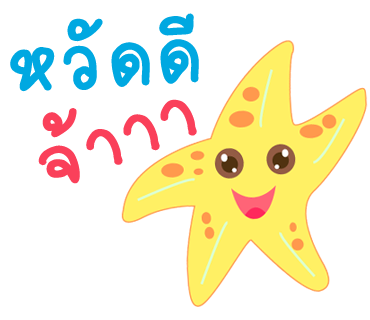
<style>
.page{position:relative;width:370px;height:320px;background:#ffffff}
.page>*{position:absolute;margin:0}
.t1{font:120px "2005_iannnnnMTV";letter-spacing:0.03em;color:#00a8e1;scale:1.06 1}
.t2{font:120px "2005_iannnnnMTV";letter-spacing:0.03em;color:#fa405a;scale:1.06 1}
</style>
<div class="page">
<p class="t1" style="left:10px;top:13px;width:189px;height:79px;rotate:-4deg">หวัดดี</p>
<p class="t2" style="left:38px;top:99px;width:159px;height:85px;rotate:-22deg">จ้าาา</p>
</div>
